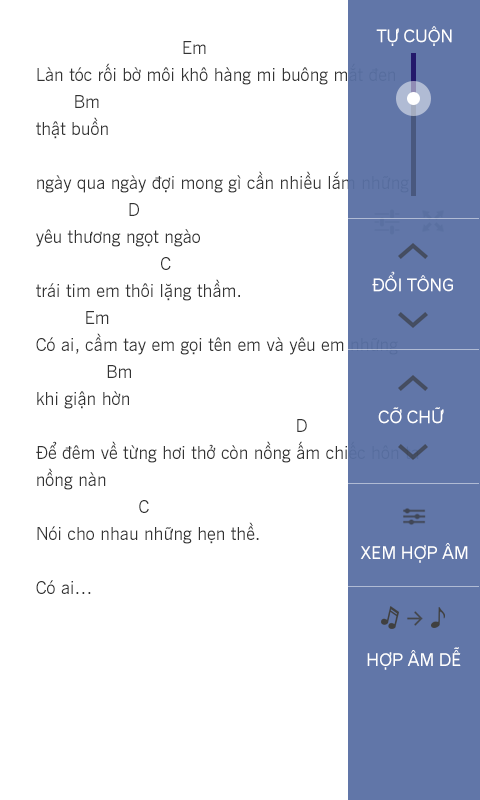
<style>
.page{position:relative;width:480px;height:800px;background:#ffffff}
.page>*{position:absolute;margin:0}
.t1{font:17px "UVNGioMay";color:#ffffff}
.t2{font:18px/27px "UVNTinTuc";color:#333333}
</style>
<div class="page">
<p class="t1" style="left:376px;top:26px;width:76px;height:20px">TỰ CUỘN</p>
<p class="t2" style="left:36px;top:41px;width:383px;height:553px">Em                                                                                                  <br>Làn tóc rối bờ môi khô hàng mi buông mắt đen <br>       Bm  <br>thật buồn<br>                                                                                                                                 <br>ngày qua ngày đợi mong gì cần nhiều lắm những <br>                 D<br>yêu thương ngọt ngào<br>                       C                                          <br>trái tim em thôi lặng thầm.<br>         Em                                                                                                                       <br>Có ai, cầm tay em gọi tên em và yêu em những <br>             Bm    <br>khi giận hờn<br>                                                D                                                                     <br>Để đêm về từng hơi thở còn nồng ấm chiếc hôn ta nồng nàn<br>                   C                                        <br>Nói cho nhau những hẹn thề.<br>            <br>Có ai…</p>
<p class="t1" style="left:372px;top:271px;width:81px;height:21px">ĐỔI TÔNG</p>
<p class="t1" style="left:378px;top:407px;width:66px;height:17px">CỠ CHỮ</p>
<p class="t1" style="left:360px;top:543px;width:108px;height:20px">XEM HỢP ÂM</p>
<p class="t1" style="left:367px;top:647px;width:94px;height:23px">HỢP ÂM DỄ</p>
</div>
